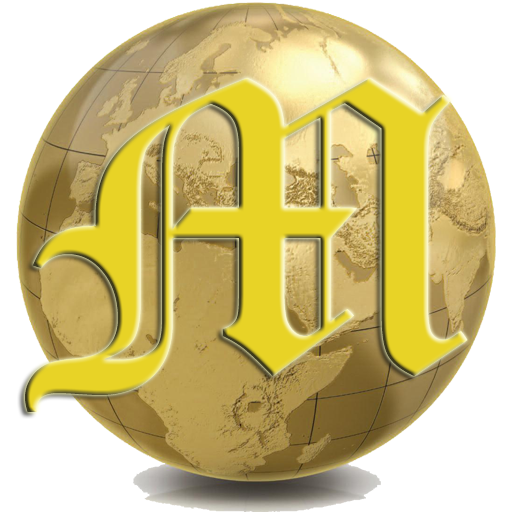
<style>
.page{position:relative;width:512px;height:512px;background:#ffffff}
.page>*{position:absolute;margin:0}
.t1{font:402.6px "OldEnglishTextMT";color:#e8d326;scale:1.12 1}
</style>
<div class="page">
<p class="t1" style="left:25px;top:77px;width:443px;height:335px">M</p>
</div>
